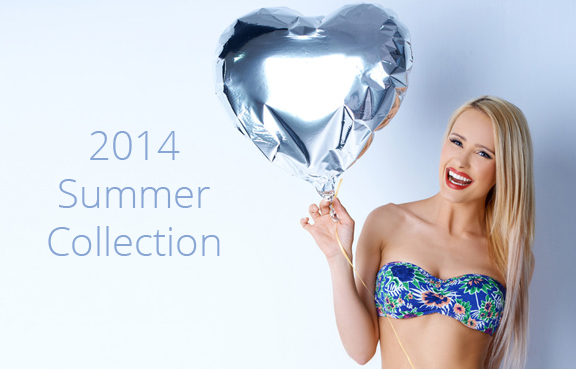
<style>
.page{position:relative;width:576px;height:369px}
.page>*{position:absolute;margin:0}
.t1{font:40px "OpenSans-Light";color:#88a5d4}
</style>
<div class="page">
<p class="t1" style="left:48px;top:131px;width:172px;height:125px;text-align:center">2014<br>Summer<br>Collection</p>
</div>
